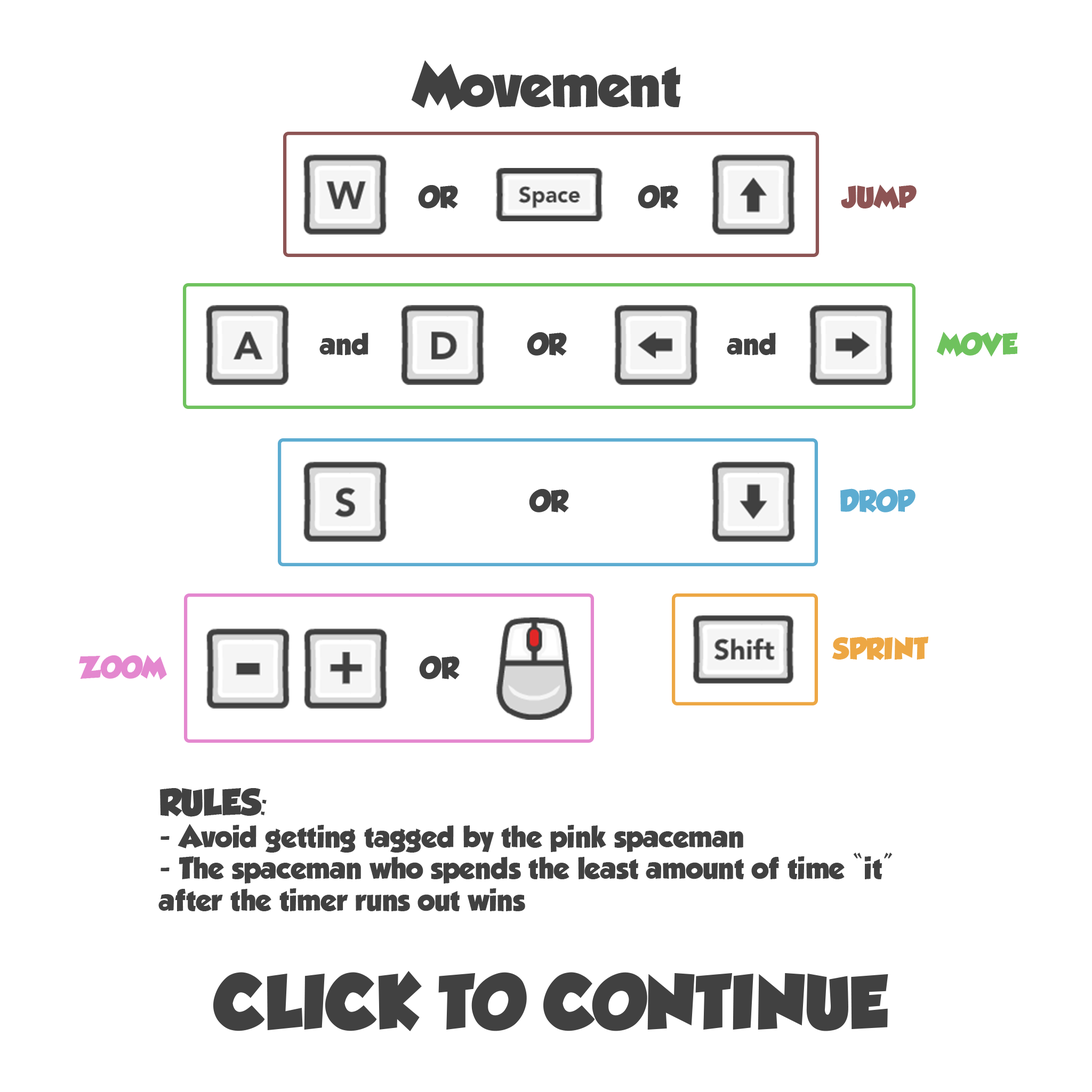
<style>
.page{position:relative;width:1092px;height:1092px;background:#ffffff}
.page>*{position:absolute;margin:0}
.t1{font:53.3px "GROBOLD";color:#414141}
.t2{font:26.6px "GROBOLD";color:#414141}
.t3{font:26.6px "GROBOLD";color:#8d5454}
.t4{font:26.6px "GROBOLD";color:#6fc25e}
.t5{font:26.6px "GROBOLD";color:#5dacd1}
.t6{font:26.6px "GROBOLD";color:#eda744}
.t7{font:26.6px "GROBOLD";color:#e488cf}
.t8{font:33.3px "GROBOLD";color:#414141}
.t9{font:66.6px "GROBOLD";color:#414141}
</style>
<div class="page">
<p class="t1" style="left:411px;top:60px;width:270px;height:50px">Movement</p>
<p class="t2" style="left:418px;top:185px;width:40px;height:23px">OR</p>
<p class="t2" style="left:638px;top:185px;width:40px;height:23px">OR</p>
<p class="t3" style="left:841px;top:184px;width:76px;height:26px">JUMP</p>
<p class="t2" style="left:319px;top:333px;width:49px;height:22px">and</p>
<p class="t2" style="left:527px;top:332px;width:40px;height:24px">OR</p>
<p class="t2" style="left:727px;top:333px;width:49px;height:22px">and</p>
<p class="t4" style="left:936px;top:332px;width:82px;height:25px">MOVE</p>
<p class="t2" style="left:529px;top:489px;width:40px;height:23px">OR</p>
<p class="t5" style="left:840px;top:488px;width:75px;height:24px">DROP</p>
<p class="t6" style="left:832px;top:637px;width:97px;height:23px">SPRINT</p>
<p class="t7" style="left:79px;top:655px;width:88px;height:25px">ZOOM</p>
<p class="t2" style="left:419px;top:656px;width:41px;height:23px">OR</p>
<p class="t2" style="left:158px;top:788px;width:735px;height:123px"><span class="t8">RULES:</span><br>- Avoid getting tagged by the pink spaceman<br>- The spaceman who spends the least amount of time “it”<br>after the timer runs out wins</p>
<p class="t9" style="left:213px;top:971px;width:675px;height:60px">CLICK TO CONTINUE</p>
</div>
